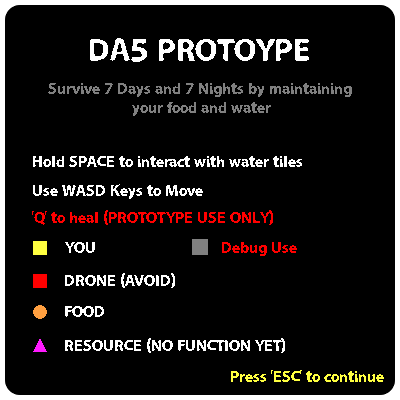
<style>
.page{position:relative;width:400px;height:400px;background:#000000}
.page>*{position:absolute;margin:0}
.t1{font:32px "LooseySans";color:#ffffff}
.t2{font:16px "LooseySans";color:#808080}
.t3{font:16px "LooseySans";color:#ffffff}
.t4{font:16px "LooseySans";color:#ff0000}
.t5{font:16px "LooseySans";color:#ffff40}
</style>
<div class="page">
<p class="t1" style="left:90px;top:38px;width:219px;height:24px">DA5 PROTOYPE</p>
<p class="t2" style="left:48px;top:83px;width:304px;height:33px;text-align:center">Survive 7 Days and 7 Nights by maintaining <br>your food and water</p>
<p class="t3" style="left:33px;top:156px;width:269px;height:11px">Hold SPACE to interact with water tiles</p>
<p class="t3" style="left:33px;top:184px;width:170px;height:15px">Use WASD Keys to Move</p>
<p class="t4" style="left:32px;top:210px;width:241px;height:15px">'Q' to heal (PROTOTYPE USE ONLY)</p>
<p class="t3" style="left:65px;top:242px;width:30px;height:11px">YOU</p>
<p class="t4" style="left:222px;top:242px;width:75px;height:14px">Debug Use</p>
<p class="t3" style="left:65px;top:273px;width:110px;height:15px">DRONE (AVOID)</p>
<p class="t3" style="left:65px;top:306px;width:39px;height:11px">FOOD</p>
<p class="t3" style="left:65px;top:338px;width:220px;height:15px">RESOURCE (NO FUNCTION YET)</p>
<p class="t5" style="left:231px;top:370px;width:153px;height:12px">Press 'ESC' to continue</p>
</div>
